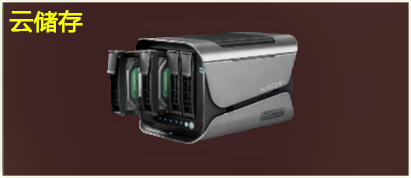
<style>
.page{position:relative;width:411px;height:178px}
.page>*{position:absolute;margin:0}
.t1{font:24px "MicrosoftYaHeiUI";color:#f4ff00;font-weight:bold}
</style>
<div class="page">
<p class="t1" style="left:9px;top:10px;width:74px;height:23px">云储存</p>
</div>
